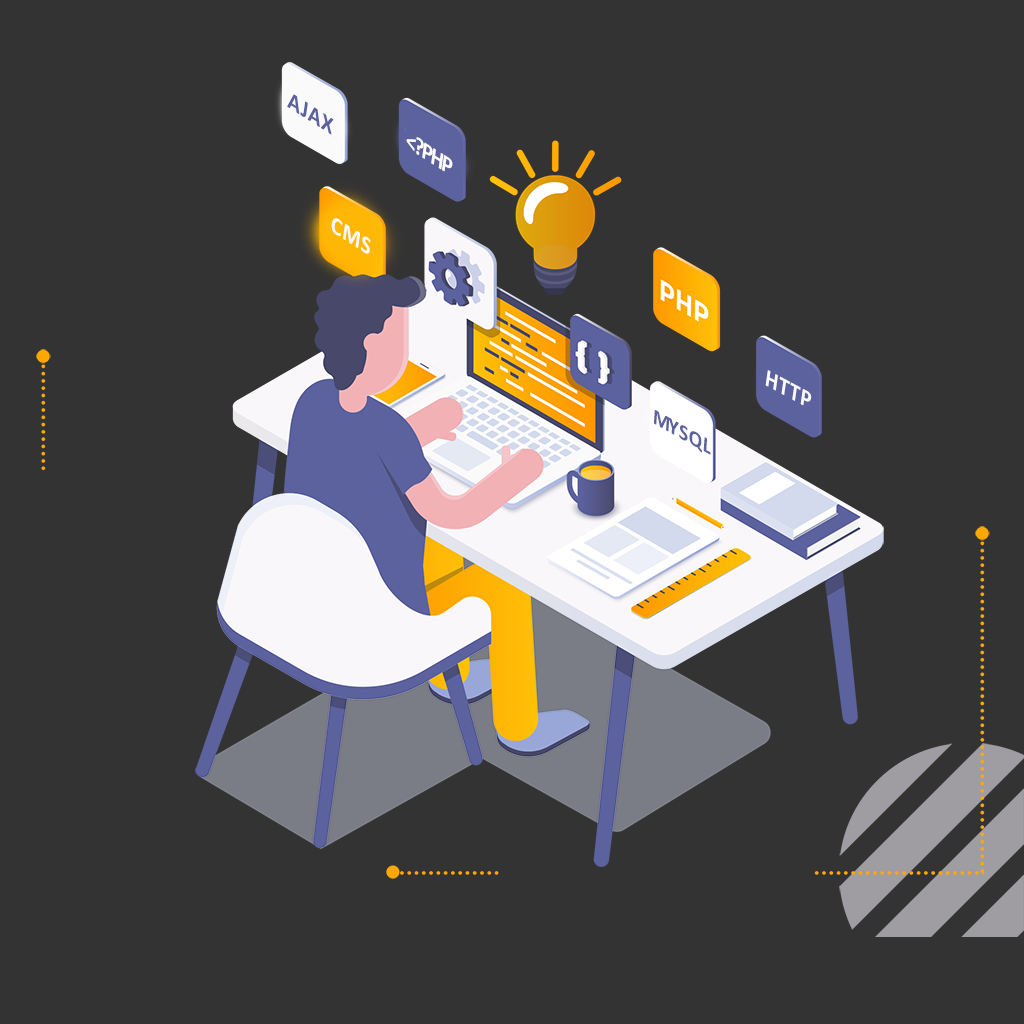
<style>
.page{position:relative;width:1024px;height:1024px;background:#333333}
.page>*{position:absolute;margin:0}
.t1{font:24.3px "Calibri-Bold";letter-spacing:-0.1em;color:#5c629e;text-transform:uppercase}
.t2{font:24.3px "Calibri-Bold";letter-spacing:-0.1em;color:#fafafa;text-transform:uppercase}
.t3{font:24.6px "Calibri-Bold";letter-spacing:-0.1em;color:#fafafa;text-transform:uppercase;scale:0.95 1}
.t4{font:22px "Calibri-Bold";letter-spacing:-0.1em;color:#5c629e;text-transform:uppercase}
</style>
<div class="page">
<p class="t1" style="left:287px;top:94px;width:47px;height:41px;rotate:32deg">A j a x</p>
<p class="t2" style="left:406px;top:137px;width:47px;height:35px;rotate:32deg">&lt;?php</p>
<p class="t2" style="left:331px;top:218px;width:40px;height:36px;rotate:32deg">C M S</p>
<p class="t3" style="left:765px;top:370px;width:47px;height:36px;rotate:28deg">h t t p</p>
<p class="t4" style="left:654px;top:410px;width:57px;height:45px;rotate:29deg">my s q l</p>
</div>
